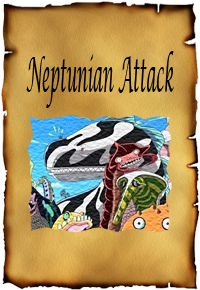
<style>
.page{position:relative;width:200px;height:290px}
.page>*{position:absolute;margin:0}
.t1{font:48px "LucidaCalligraphy-Italic";color:#000000;scale:0.31 1}
</style>
<div class="page">
<p class="t1" style="left:26px;top:51px;width:148px;height:57px">Neptunian Attack</p>
</div>
